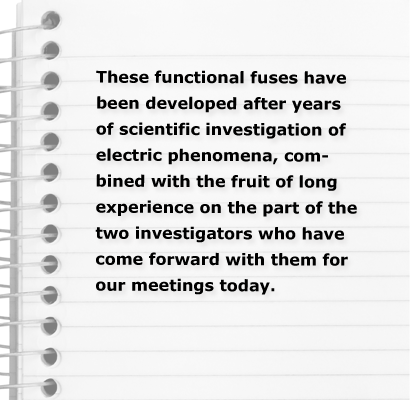
<style>
.page{position:relative;width:411px;height:400px}
.page>*{position:absolute;margin:0}
.t1{font:16px/26px "Verdana-Bold";color:#000000}
</style>
<div class="page">
<p class="t1" style="left:95px;top:70px;width:262px;height:225px">These functional fuses have been developed after years of scientific investigation of electric phenomena, combined with the fruit of long experience on the part of the two investigators who have come forward with them for our meetings today.</p>
</div>
